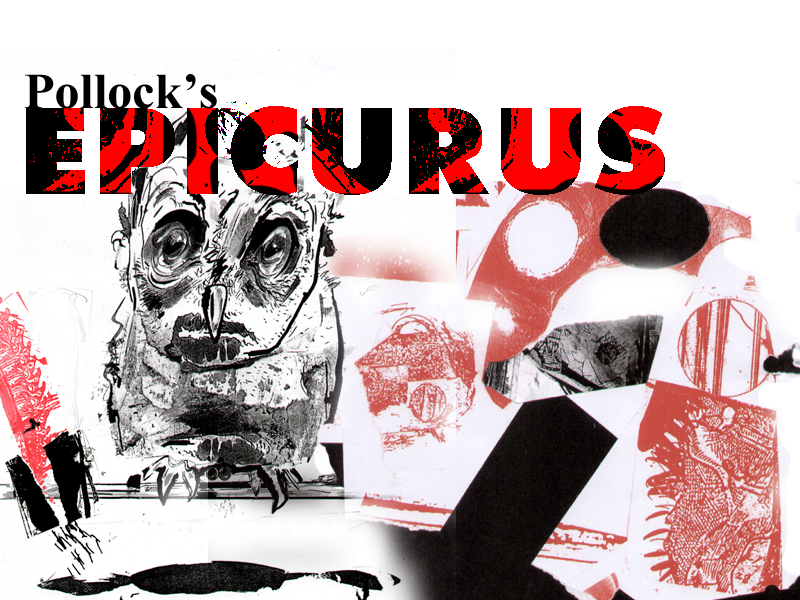
<style>
.page{position:relative;width:800px;height:600px;background:#ffffff}
.page>*{position:absolute;margin:0}
.t1{font:50px "TimesNewRomanPS-BoldMT";color:#000000}
.t2{font:116.7px "Thehits"}
</style>
<div class="page">
<p class="t1" style="left:25px;top:74px;width:192px;height:35px">Pollock’s</p>
<p class="t2" style="left:26px;top:106px;width:639px;height:89px">EPICURUS</p>
</div>
